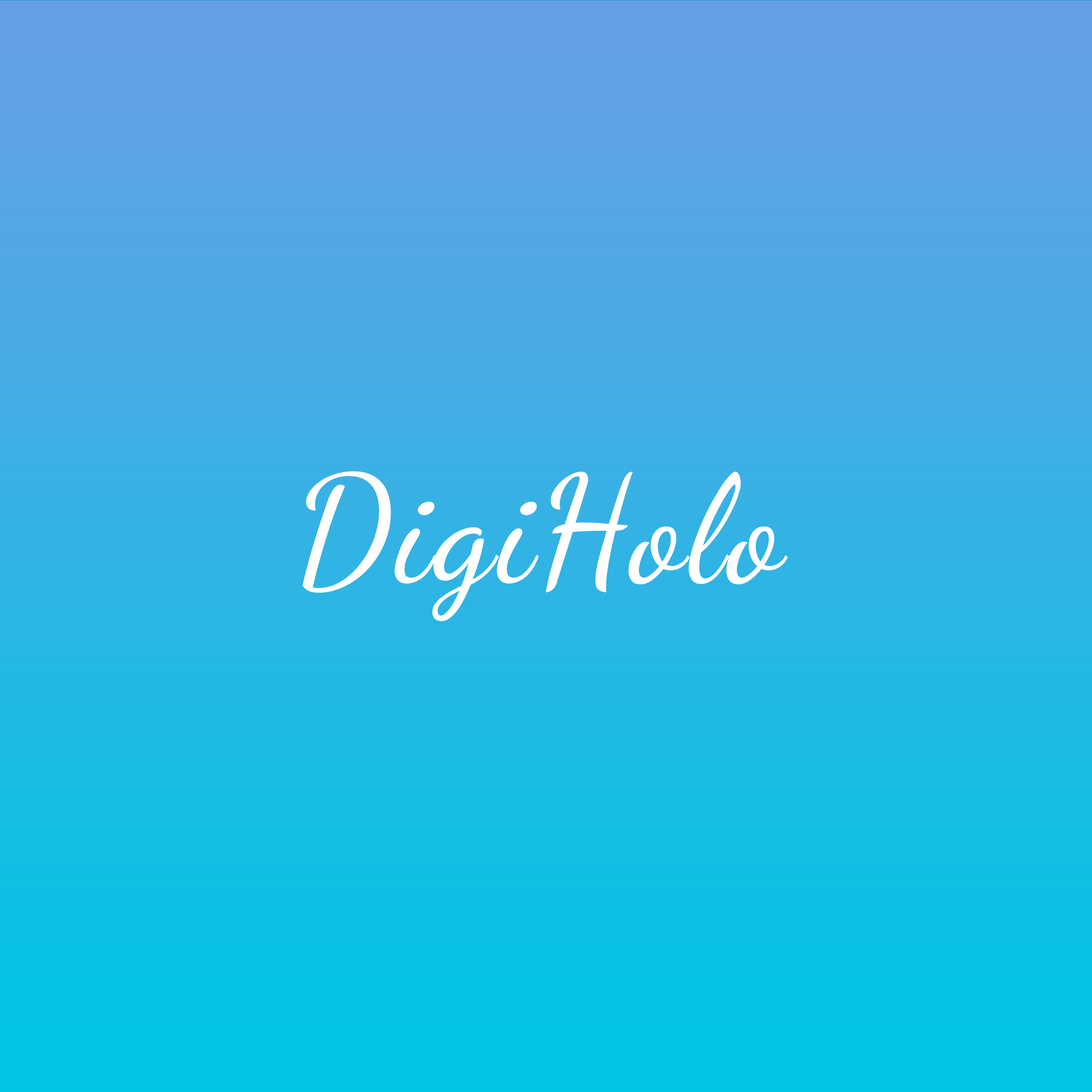
<style>
.page{position:relative;width:1092px;height:1092px}
.page>*{position:absolute;margin:0}
.t1{font:149.2px "DancingScript";color:#ffffff;font-weight:bold}
</style>
<div class="page">
<p class="t1" style="left:302px;top:471px;width:486px;height:150px">DigiHolo</p>
</div>
